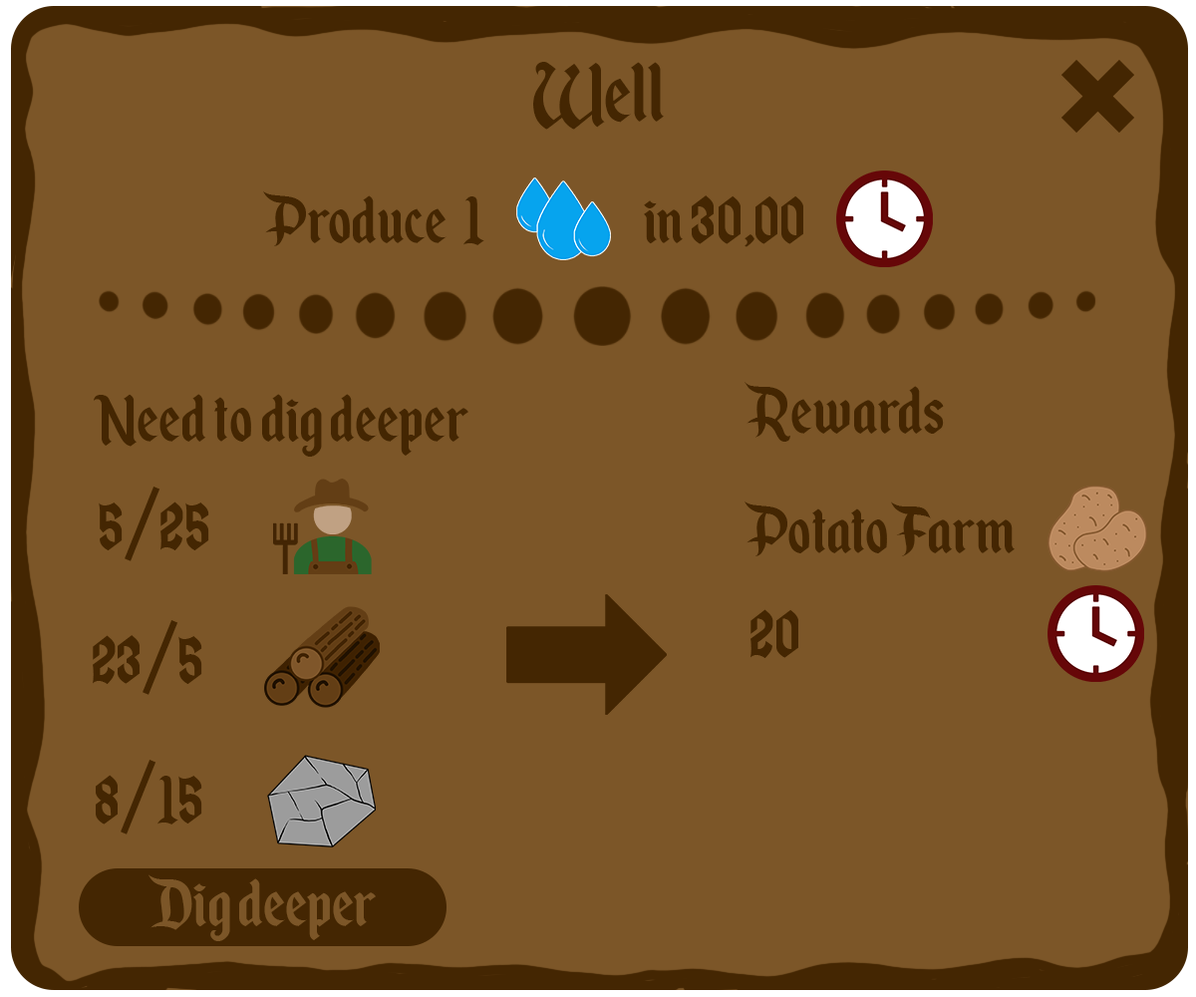
<style>
.page{position:relative;width:1196px;height:997px;background:#7c5628}
.page>*{position:absolute;margin:0}
.t1{font:99.7px "EnchantedLand";color:#442602}
.t2{font:79.7px "EnchantedLand";color:#442602}
.t3{font:79.7px "EnchantedLand";color:#7c5628}
</style>
<div class="page">
<p class="t1" style="left:533px;top:62px;width:131px;height:68px">Well</p>
<p class="t2" style="left:263px;top:190px;width:221px;height:56px">Produce  1</p>
<p class="t2" style="left:644px;top:195px;width:159px;height:52px">in 30,00</p>
<p class="t2" style="left:745px;top:382px;width:199px;height:60px">Rewards</p>
<p class="t2" style="left:94px;top:394px;width:375px;height:63px">Need to dig deeper</p>
<p class="t2" style="left:99px;top:486px;width:110px;height:75px">5/25</p>
<p class="t2" style="left:745px;top:500px;width:270px;height:56px">Potato Farm</p>
<p class="t2" style="left:751px;top:609px;width:47px;height:49px">20</p>
<p class="t2" style="left:93px;top:620px;width:109px;height:75px">23/5</p>
<p class="t2" style="left:96px;top:760px;width:106px;height:74px">8/15</p>
<p class="t3" style="left:149px;top:874px;width:227px;height:67px">Dig deeper</p>
</div>
